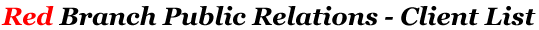
<style>
.page{position:relative;width:539px;height:30px;background:#ffffff}
.page>*{position:absolute;margin:0}
.t1{font:25px "Georgia-BoldItalic";color:#000000}
.t2{font:25px "Georgia-BoldItalic";color:#ff0000}
</style>
<div class="page">
<p class="t1" style="left:1px;top:6px;width:535px;height:20px"><span class="t2">Red</span> Branch Public Relations - Client List</p>
</div>
